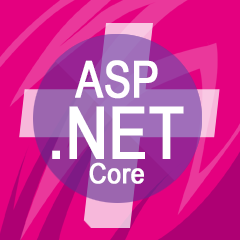
<style>
.page{position:relative;width:240px;height:240px;background:#e4007f}
.page>*{position:absolute;margin:0}
.t1{font:50.9px "ArialNarrow";color:#ffffff;font-weight:bold;scale:0.97 1}
.t2{font:71.9px "ArialNarrow";color:#ffffff;font-weight:bold;scale:0.97 1}
.t3{font:28px "ArialNarrow";color:#ffffff;font-weight:bold;scale:1.06 1}
</style>
<div class="page">
<p class="t1" style="left:75px;top:60px;width:83px;height:39px">ASP</p>
<p class="t2" style="left:52px;top:106px;width:132px;height:53px">.NET</p>
<p class="t3" style="left:89px;top:162px;width:55px;height:22px">Core</p>
</div>
